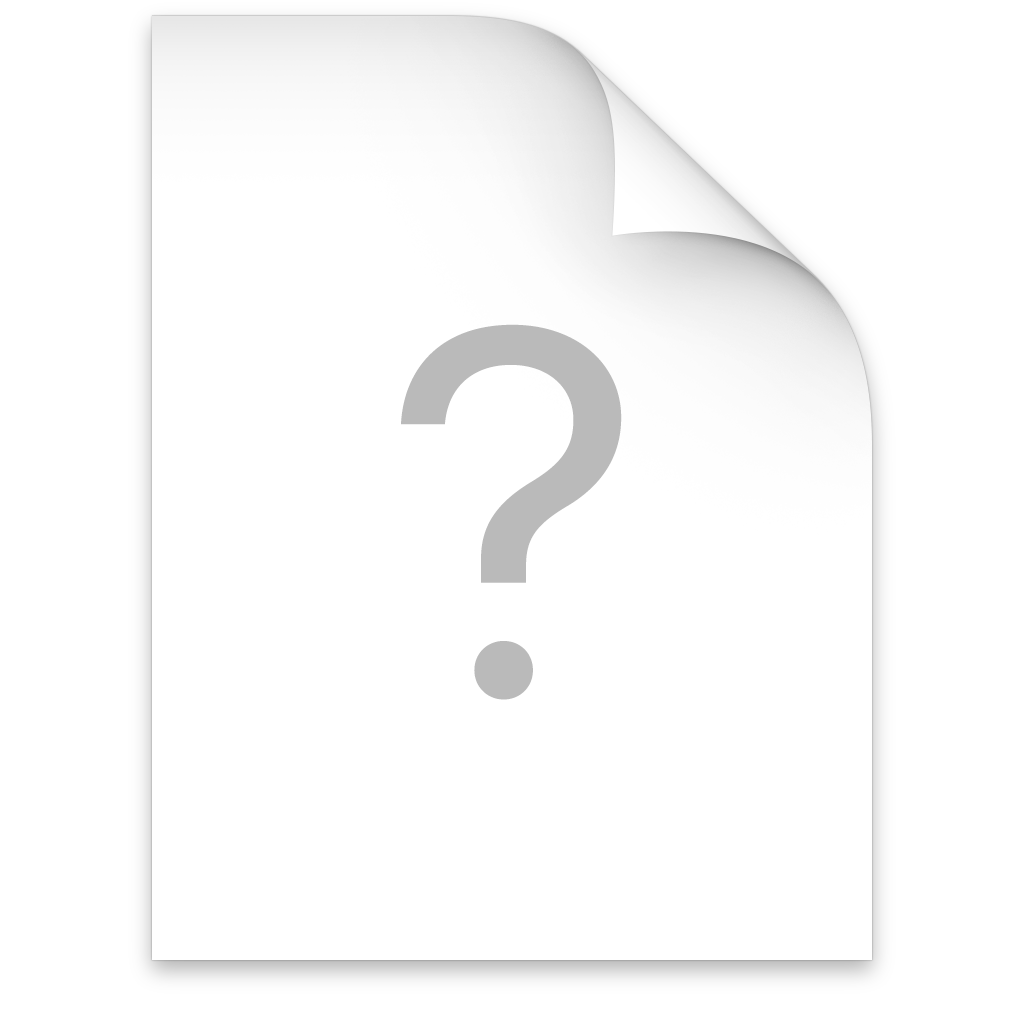
<style>
.page{position:relative;width:1024px;height:1024px;background:#ffffff}
.page>*{position:absolute;margin:0}
.t1{font:523.9px "SFProDisplay-Regular";letter-spacing:-0.016em;color:#bababa}
</style>
<div class="page">
<p class="t1" style="left:401px;top:324px;width:221px;height:376px">?</p>
</div>
